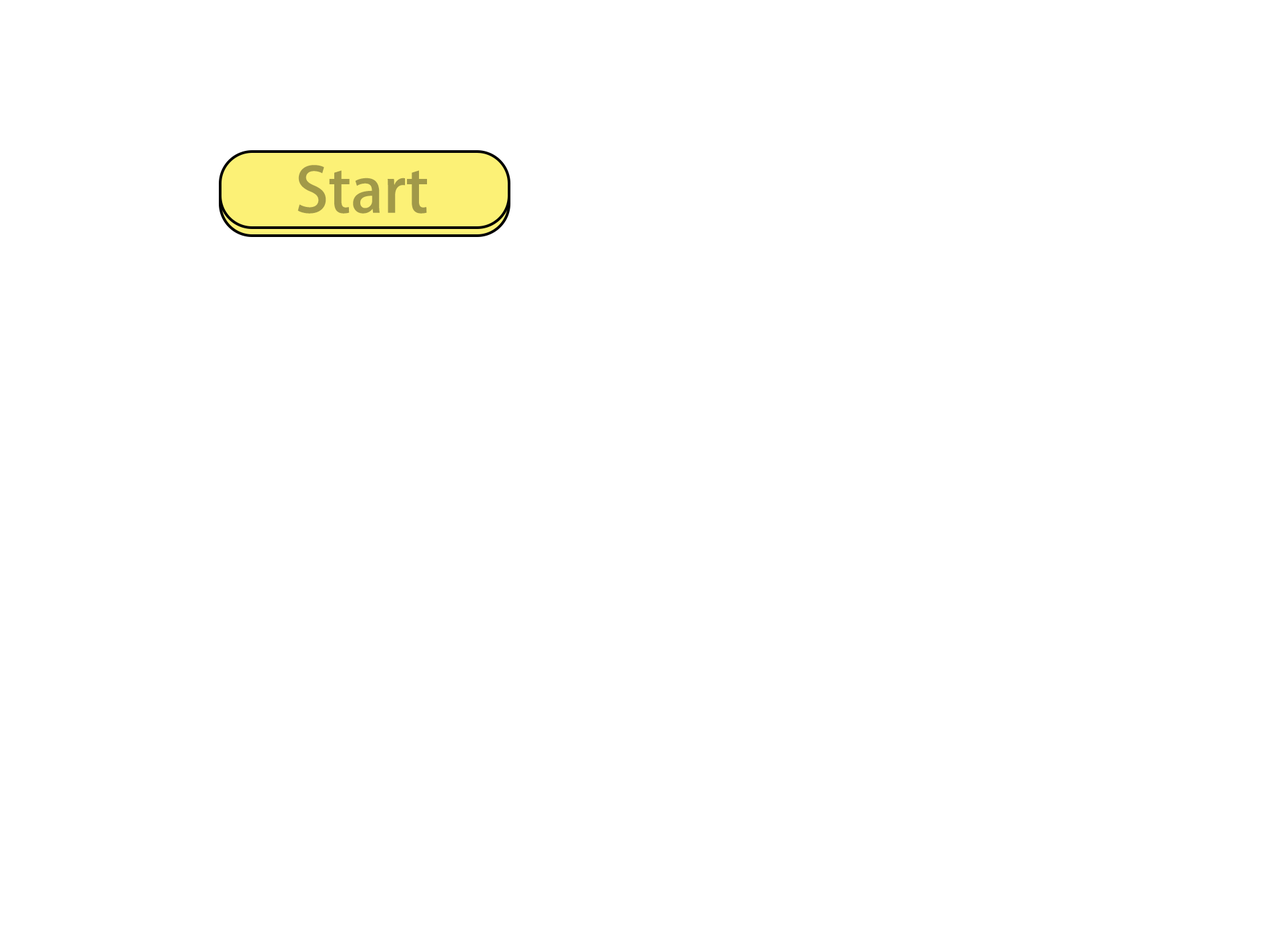
<style>
.page{position:relative;width:1261px;height:946px;background:#ffffff}
.page>*{position:absolute;margin:0}
.t1{font:61.2px "AdobeHeitiStd-Regular";color:#a19949}
</style>
<div class="page">
<p class="t1" style="left:298px;top:165px;width:129px;height:49px">Start</p>
</div>
